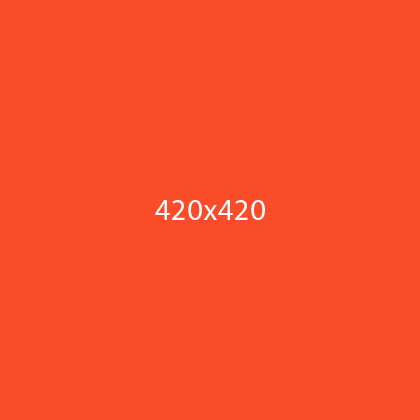
<style>
.page{position:relative;width:420px;height:420px;background:#fa4c29}
.page>*{position:absolute;margin:0}
.t1{font:30px "MyriadPro-Regular";letter-spacing:0.025em;color:#ffffff}
</style>
<div class="page">
<p class="t1" style="left:155px;top:200px;width:110px;height:20px">420x420</p>
</div>
